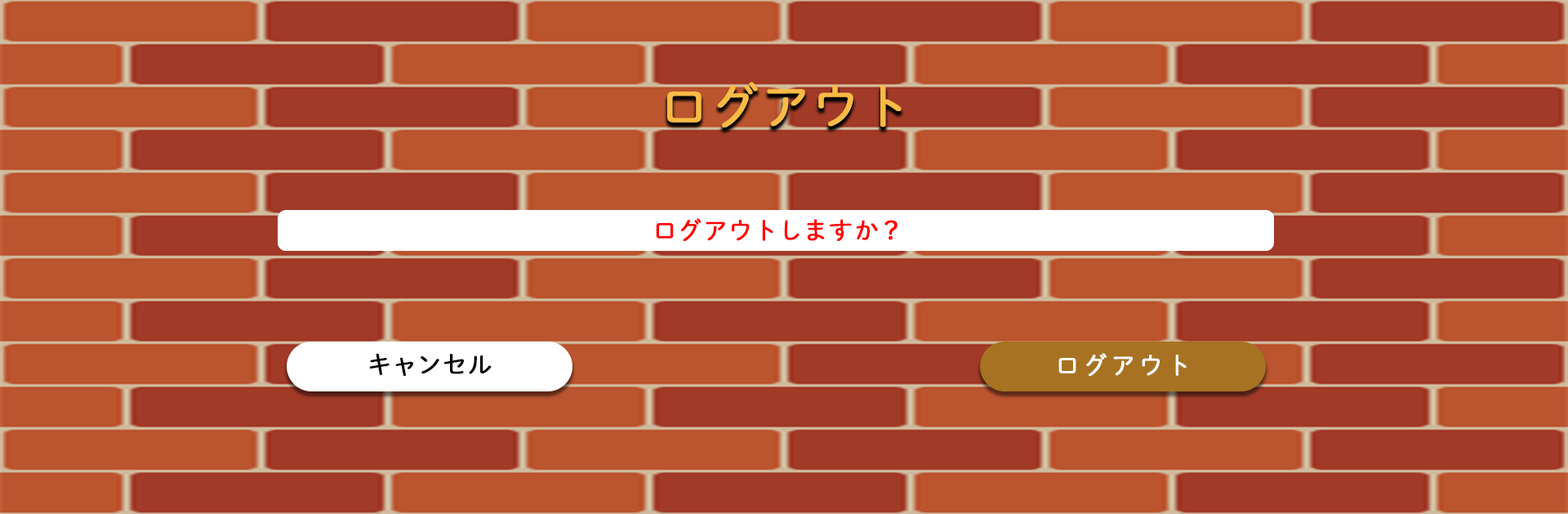
<style>
.page{position:relative;width:1568px;height:514px;background:#a23a28}
.page>*{position:absolute;margin:0}
.t1{font:49px "DNPShueiMGoStd-L";color:#fabb46;font-weight:bold}
.t2{font:24.5px "DNPShueiMGoStd-L";color:#ff0000;font-weight:bold}
.t3{font:24.5px "DNPShueiMGoStd-L";color:#000000;font-weight:bold}
.t4{font:24.5px "DNPShueiMGoStd-L";color:#fefefe;font-weight:bold}
</style>
<div class="page">
<p class="t1" style="left:667px;top:82px;width:235px;height:45px">ログアウト</p>
<p class="t2" style="left:656px;top:218px;width:242px;height:23px">ログアウトしますか？</p>
<p class="t3" style="left:369px;top:353px;width:123px;height:23px">キャンセル</p>
<p class="t4" style="left:1058px;top:353px;width:129px;height:23px">ログアウト</p>
</div>
